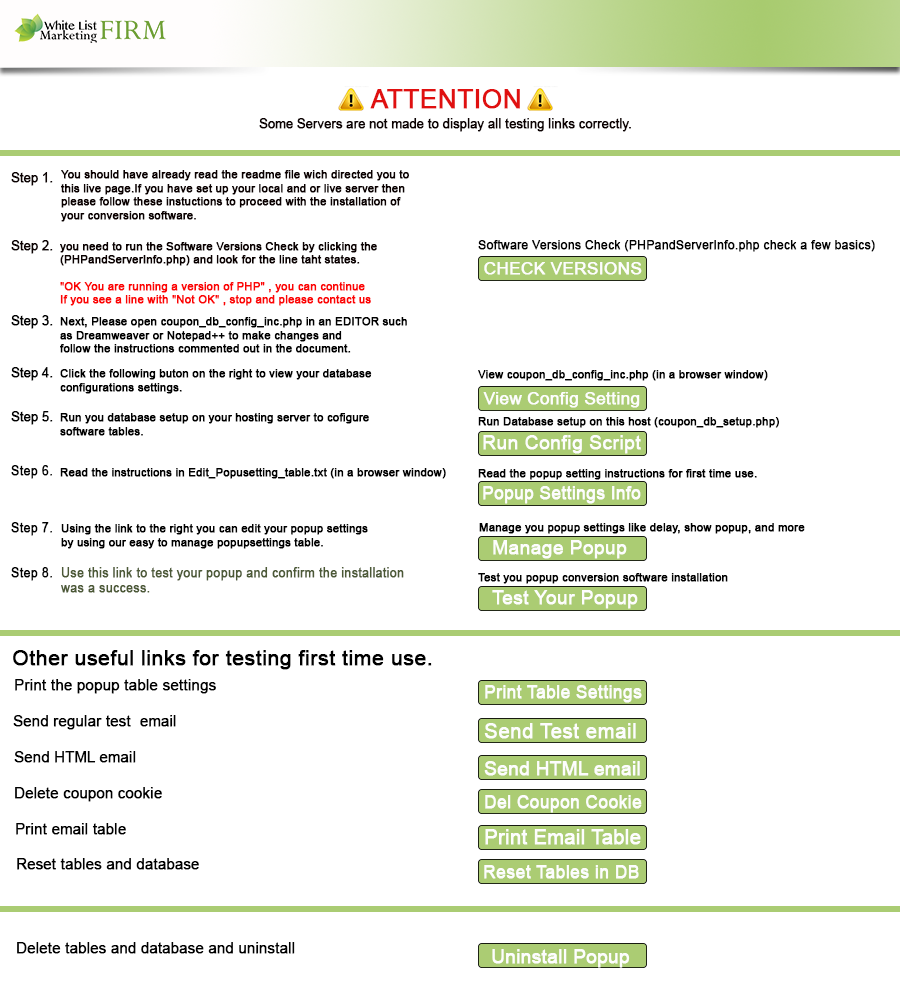
<style>
.page{position:relative;width:900px;height:1004px;background:#ffffff}
.page>*{position:absolute;margin:0}
.t1{font:26.2px "ArialMT";color:#e01010;font-weight:bold}
.t2{font:12.5px "ArialMT";color:#0b0101;font-weight:bold}
.t3{font:11.2px "ArialMT";color:#0b0101;font-weight:bold}
.t4{font:11.2px "ArialMT";color:#fc0404;font-weight:bold}
.t5{font:11.9px "ArialMT";color:#000000;font-weight:bold}
.t6{font:16.9px "ArialMT";color:#fdfdfd;font-weight:bold}
.t7{font:12.5px "ArialMT";color:#000000;font-weight:bold}
.t8{font:11.2px "ArialMT";color:#000000;font-weight:bold}
.t9{font:19.4px "ArialMT";color:#fdfdfd;font-weight:bold}
.t10{font:17.8px "ArialMT";color:#fdfdfd;font-weight:bold;scale:0.97 1}
.t11{font:12.7px "ArialMT";color:#000000;font-weight:bold}
.t12{font:11.5px "ArialMT";color:#000000;font-weight:bold}
.t13{font:12.5px "ArialMT";color:#4c5936;font-weight:bold}
.t14{font:20.3px "ArialMT";color:#000000;font-weight:bold;scale:1.04 1}
.t15{font:14.6px "ArialMT";color:#000000;font-weight:bold}
.t16{font:17.8px "ArialMT";color:#fdfdfd;font-weight:bold}
.t17{font:21.1px "ArialMT";color:#fdfdfd;font-weight:bold;scale:0.97 1}
.t18{font:19.4px "ArialMT";color:#fdfdfd;font-weight:bold;scale:0.96 1}
.t19{font:20.3px "ArialMT";color:#fdfdfd;font-weight:bold}
</style>
<div class="page">
<p class="t1" style="left:370px;top:89px;width:150px;height:20px">ATTENTION</p>
<p class="t2" style="left:259px;top:118px;width:372px;height:14px">Some Servers are not made to display all testing links correctly.</p>
<p class="t2" style="left:11px;top:172px;width:42px;height:14px">Step 1.</p>
<p class="t3" style="left:61px;top:170px;width:348px;height:52px">You should have already read the readme file wich directed you to <br>this live page.If you have set up your local and or live server then <br>please follow these instuctions to proceed with the installation of <br>your conversion software.</p>
<p class="t2" style="left:11px;top:240px;width:42px;height:14px">Step 2.</p>
<p class="t3" style="left:60px;top:242px;width:317px;height:64px">you need to run the Software Versions Check by clicking the <br>(PHPandServerInfo.php) and look for the line taht states. <br><br><span class="t4">"OK You are running a version of PHP" , you can continue<br>If you see a line with "Not OK" , stop and please contact us</span></p>
<p class="t5" style="left:478px;top:240px;width:397px;height:12px">Software Versions Check (PHPandServerInfo.php check a few basics)</p>
<p class="t6" style="left:484px;top:262px;width:158px;height:13px">CHECK VERSIONS</p>
<p class="t7" style="left:11px;top:315px;width:42px;height:14px">Step 3.</p>
<p class="t8" style="left:60px;top:317px;width:347px;height:36px">Next, Please open coupon_db_config_inc.php in an EDITOR such <br>as Dreamweaver or Notepad++ to make changes and <br>follow the instructions commented out in the document.</p>
<p class="t7" style="left:11px;top:367px;width:42px;height:14px">Step 4.</p>
<p class="t8" style="left:60px;top:369px;width:312px;height:25px">Click the following buton on the right to view your database<br>configurations settings.</p>
<p class="t8" style="left:478px;top:370px;width:290px;height:11px">View coupon_db_config_inc.php (in a browser window)</p>
<p class="t6" style="left:483px;top:392px;width:157px;height:16px">View Config Setting</p>
<p class="t7" style="left:11px;top:411px;width:42px;height:14px">Step 5.</p>
<p class="t8" style="left:60px;top:413px;width:309px;height:23px">Run you database setup on your hosting server to cofigure<br>software tables.</p>
<p class="t8" style="left:478px;top:417px;width:301px;height:11px">Run Database setup on this host (coupon_db_setup.php)</p>
<p class="t9" style="left:483px;top:435px;width:158px;height:19px">Run Config Script</p>
<p class="t7" style="left:11px;top:465px;width:41px;height:14px">Step 6.</p>
<p class="t8" style="left:60px;top:468px;width:386px;height:11px">Read the instructions in Edit_Popusetting_table.txt (in a browser window)</p>
<p class="t8" style="left:478px;top:469px;width:279px;height:11px">Read the popup setting instructions for first time use.</p>
<p class="t10" style="left:483px;top:486px;width:158px;height:18px">Popup Settings Info</p>
<p class="t11" style="left:11px;top:522px;width:41px;height:14px">Step 7.</p>
<p class="t12" style="left:61px;top:524px;width:307px;height:25px">Using the link to the right you can edit your popup settings<br>by using our easy to manage popupsettings table.</p>
<p class="t8" style="left:479px;top:523px;width:326px;height:11px">Manage you popup settings like delay, show popup, and more</p>
<p class="t9" style="left:493px;top:540px;width:134px;height:19px">Manage Popup</p>
<p class="t7" style="left:11px;top:567px;width:41px;height:14px">Step 8.</p>
<p class="t13" style="left:61px;top:567px;width:343px;height:26px">Use this link to test your popup and confirm the installation<br>was a success.</p>
<p class="t8" style="left:478px;top:573px;width:250px;height:11px">Test you popup conversion software installation</p>
<p class="t9" style="left:492px;top:590px;width:146px;height:19px">Test Your Popup</p>
<p class="t14" style="left:13px;top:650px;width:419px;height:20px">Other useful links for testing first time use.</p>
<p class="t15" style="left:15px;top:679px;width:201px;height:15px">Print the popup table settings</p>
<p class="t16" style="left:485px;top:685px;width:157px;height:18px">Print Table Settings</p>
<p class="t15" style="left:13px;top:715px;width:163px;height:15px">Send regular test  email</p>
<p class="t17" style="left:484px;top:723px;width:152px;height:16px">Send Test email</p>
<p class="t15" style="left:14px;top:751px;width:122px;height:12px">Send HTML email</p>
<p class="t18" style="left:484px;top:761px;width:156px;height:15px">Send HTML email</p>
<p class="t15" style="left:15px;top:787px;width:147px;height:15px">Delete coupon cookie</p>
<p class="t16" style="left:485px;top:795px;width:157px;height:18px">Del Coupon Cookie</p>
<p class="t15" style="left:16px;top:823px;width:110px;height:12px">Print email table</p>
<p class="t19" style="left:485px;top:829px;width:156px;height:16px">Print Email Table</p>
<p class="t15" style="left:17px;top:858px;width:182px;height:12px">Reset tables and database</p>
<p class="t16" style="left:484px;top:865px;width:155px;height:14px">Reset Tables in DB</p>
<p class="t15" style="left:17px;top:942px;width:278px;height:12px">Delete tables and database and uninstall</p>
<p class="t18" style="left:492px;top:949px;width:138px;height:19px">Uninstall Popup</p>
</div>
